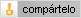
<style>
.page{position:relative;width:81px;height:18px}
.page>*{position:absolute;margin:0}
.t1{font:11px "ArialMT";color:#000000}
</style>
<div class="page">
<p class="t1" style="left:23px;top:4px;width:52px;height:11px">compártelo</p>
</div>
